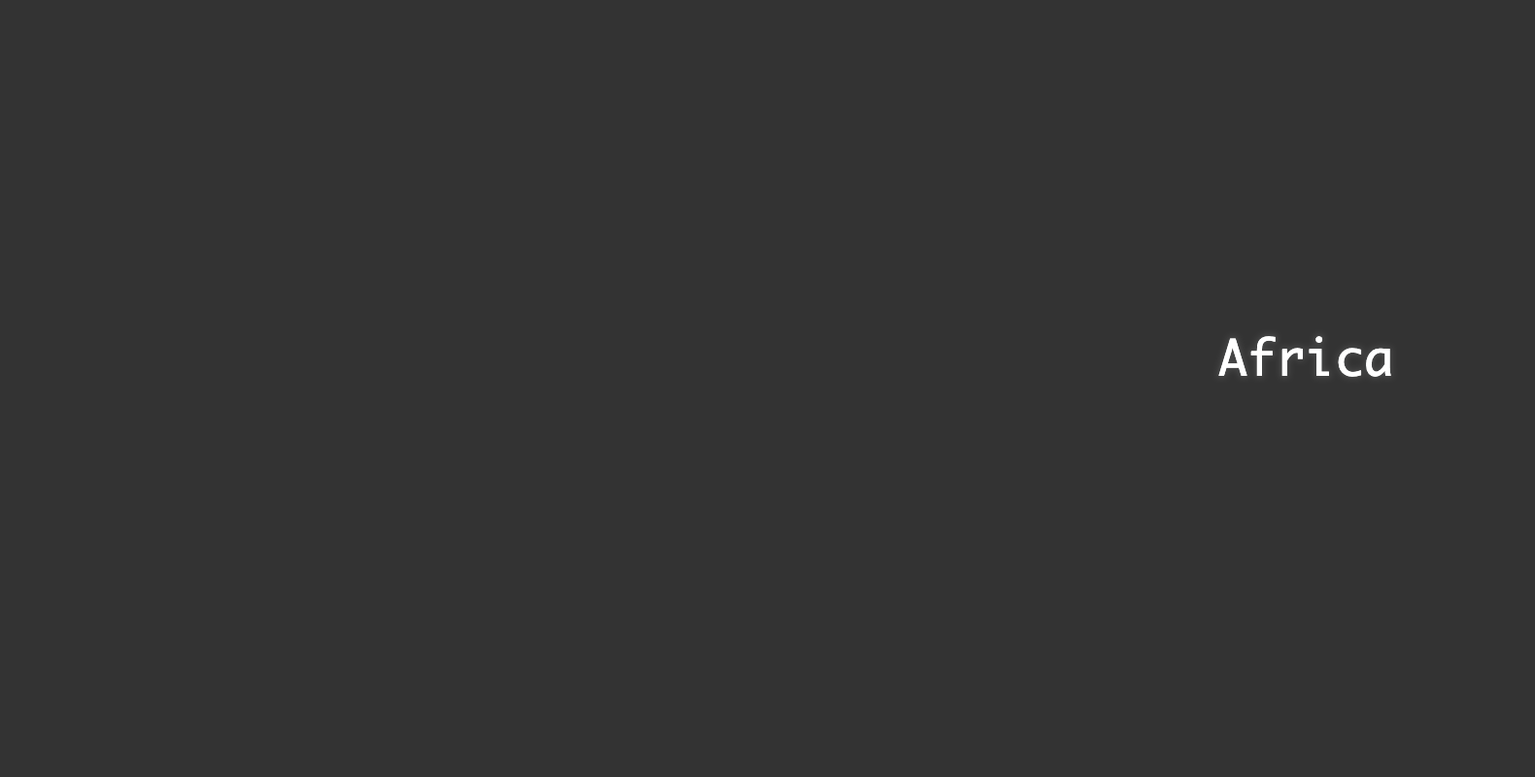
<style>
.page{position:relative;width:1535px;height:777px;background:#333333}
.page>*{position:absolute;margin:0}
.t1{font:48.6px "Ayuthaya";color:#ffffff}
</style>
<div class="page">
<p class="t1" style="left:1218px;top:336px;width:173px;height:41px">Africa</p>
</div>
